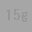
<style>
.page{position:relative;width:32px;height:32px;background:#a6a6a6}
.page>*{position:absolute;margin:0}
.t1{font:14px "HGSGothicE";color:#969696}
</style>
<div class="page">
<p class="t1" style="left:7px;top:9px;width:21px;height:13px">15g</p>
</div>
